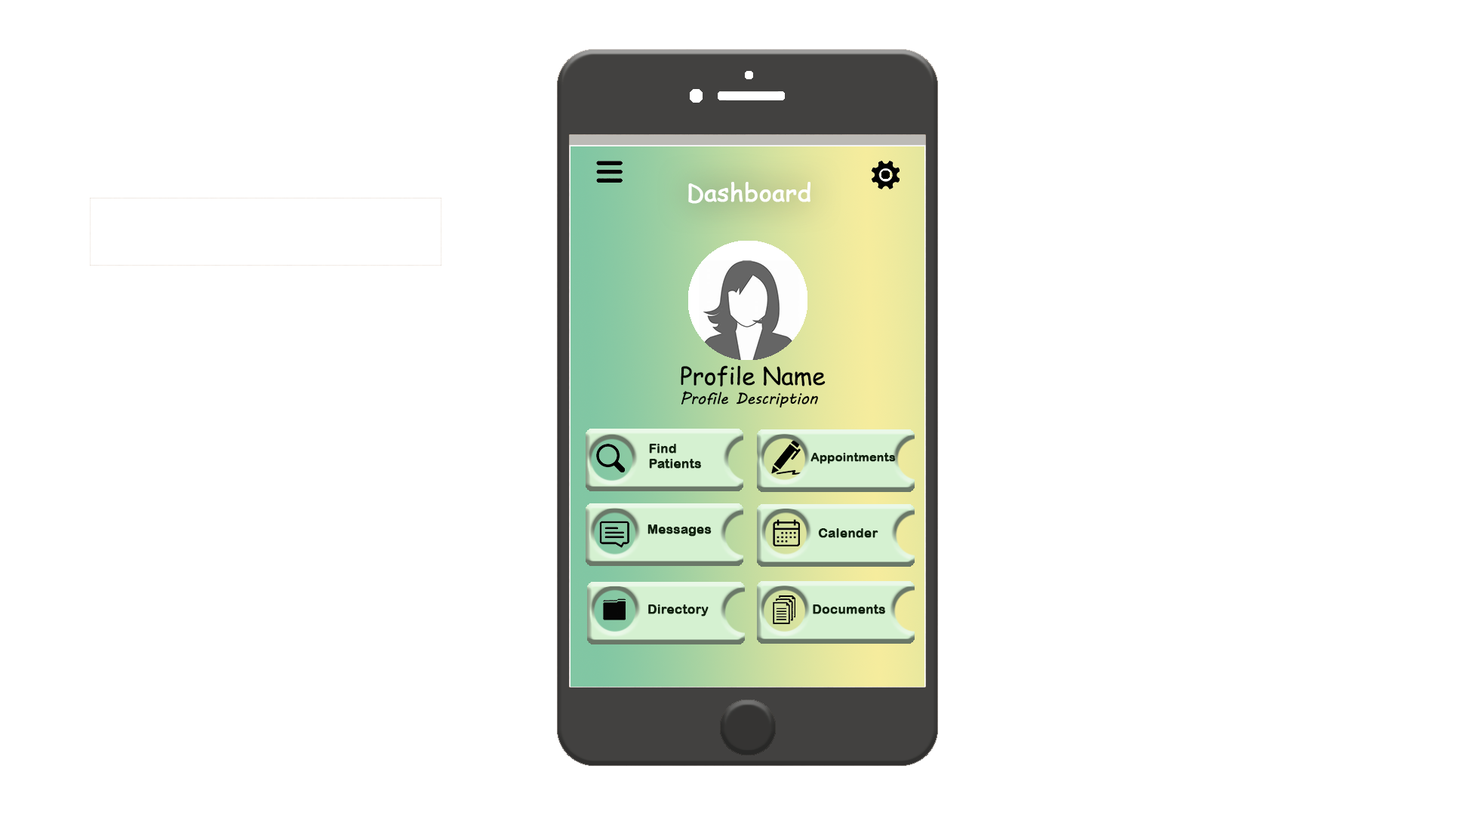
<style>
.page{position:relative;width:1464px;height:815px;background:#ffffff}
.page>*{position:absolute;margin:0}
.t1{font:24px "ComicSansMS";color:#ffffff;font-weight:bold}
.t2{font:16px "MVBoli";color:#010101}
.t3{font:24px "ComicSansMS";color:#010101}
.t4{font:12.8px "ArialRoundedMTBold";color:#0f210d;font-weight:bold}
.t5{font:12px "ArialRoundedMTBold";color:#0f210d;font-weight:bold}
</style>
<div class="page">
<p class="t1" style="left:688px;top:182px;width:122px;height:22px">Dashboard</p>
<p class="t2" style="left:680px;top:365px;width:145px;height:42px"><span class="t3">Profile Name<br></span>Profile Description</p>
<p class="t4" style="left:649px;top:444px;width:52px;height:24px">Find <br>Patients</p>
<p class="t5" style="left:810px;top:453px;width:85px;height:11px">Appointments</p>
<p class="t4" style="left:647px;top:524px;width:64px;height:12px">Messages</p>
<p class="t4" style="left:818px;top:528px;width:60px;height:10px">Calender</p>
<p class="t4" style="left:648px;top:604px;width:60px;height:12px">Directory</p>
<p class="t4" style="left:812px;top:604px;width:73px;height:10px">Documents</p>
</div>
